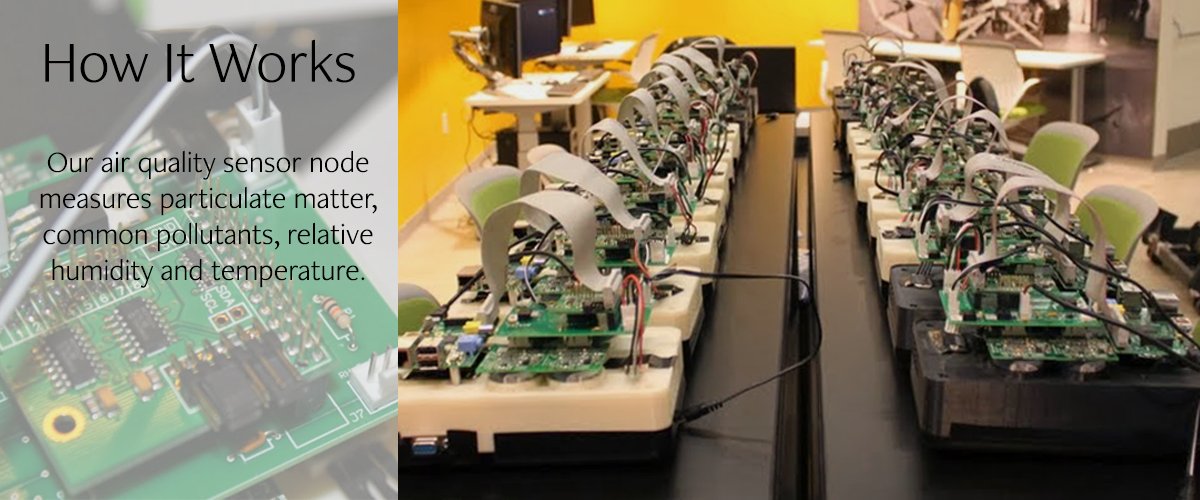
<style>
.page{position:relative;width:1200px;height:500px}
.page>*{position:absolute;margin:0}
.t1{font:60px "FreightNeoProLight-Regular";color:#000000}
.t2{font:30px "FreightNeoProLight-Regular";color:#000000}
</style>
<div class="page">
<p class="t1" style="left:45px;top:39px;width:310px;height:44px">How It Works</p>
<p class="t2" style="left:40px;top:150px;width:337px;height:138px;text-align:center">Our air quality sensor node measures particulate matter, common pollutants, relative humidity and temperature.</p>
</div>
